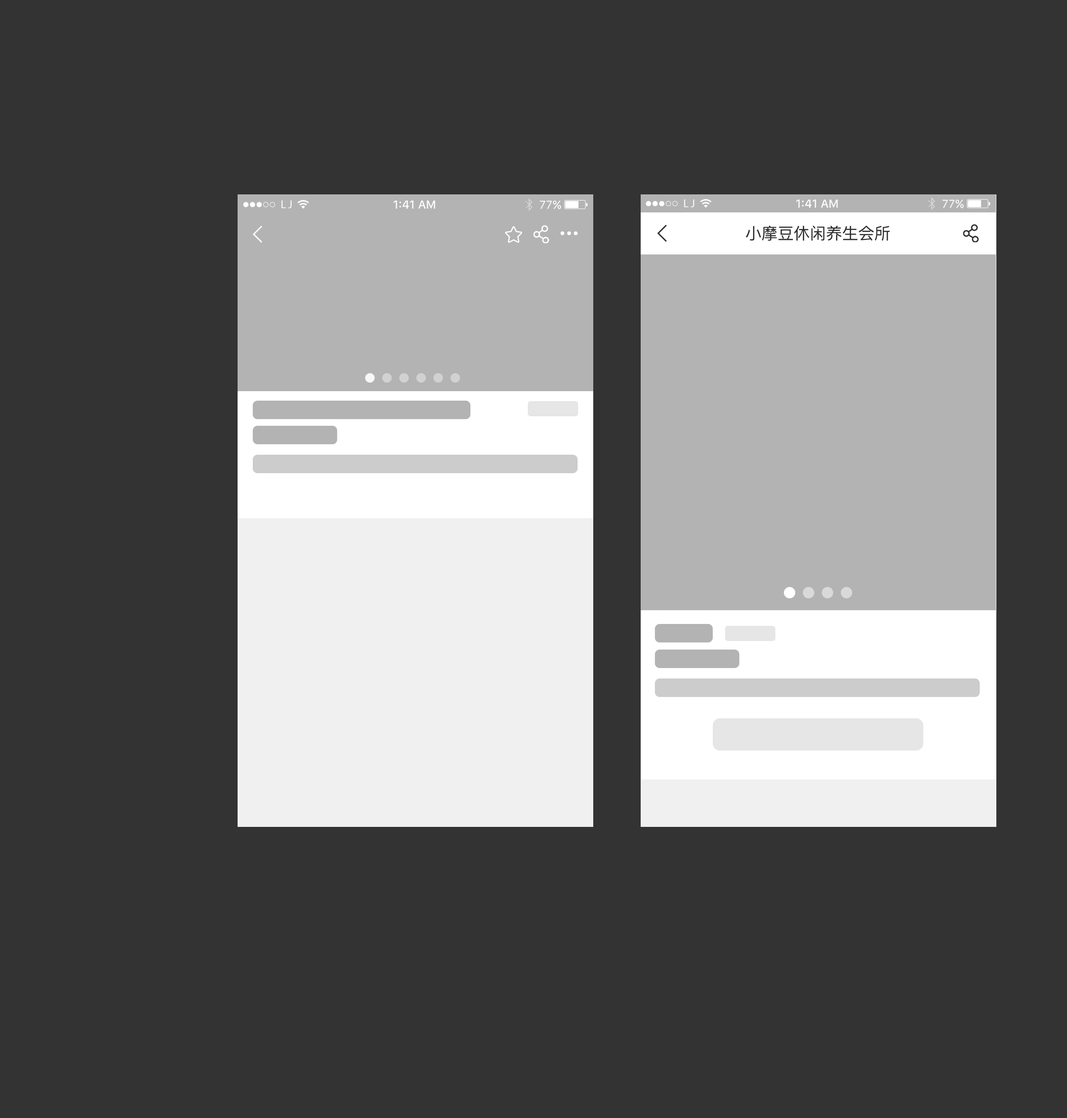
<style>
.page{position:relative;width:1067px;height:1118px;background:#333333}
.page>*{position:absolute;margin:0}
.t1{font:11.4px "MyriadPro-Regular";letter-spacing:-0.025em;color:#ffffff}
.t2{font:11.4px "SFUIText-Medium";color:#ffffff}
.t3{font:11.4px "SFUIText-Regular";color:#ffffff}
.t4{font:16.1px "PingFang-SC-Medium";color:#2e2e2e}
</style>
<div class="page">
<p class="t1" style="left:281px;top:200px;width:11px;height:9px">L J</p>
<p class="t2" style="left:393px;top:201px;width:42px;height:8px">1:41 AM</p>
<p class="t3" style="left:540px;top:201px;width:21px;height:9px">77%</p>
<p class="t1" style="left:684px;top:199px;width:10px;height:9px">L J</p>
<p class="t2" style="left:796px;top:200px;width:42px;height:8px">1:41 AM</p>
<p class="t3" style="left:942px;top:200px;width:21px;height:9px">77%</p>
<p class="t4" style="left:745px;top:225px;width:145px;height:16px">小摩豆休闲养生会所</p>
</div>
